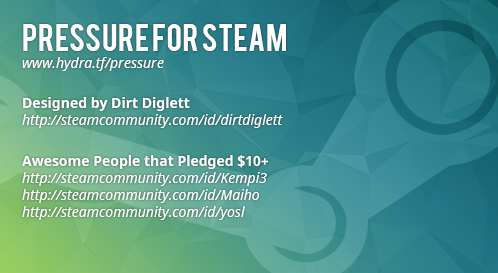
<style>
.page{position:relative;width:498px;height:273px}
.page>*{position:absolute;margin:0}
.t1{font:14px/11px "NotoSans-Italic";color:#ffffff}
.t2{font:30px/11px "Bebas";color:#ffffff}
.t3{font:14px/11px "NotoSans-Bold";color:#ffffff}
</style>
<div class="page">
<p class="t1" style="left:22px;top:24px;width:264px;height:47px"><span class="t2">Pressure for Steam<br></span>www.hydra.tf/pressure</p>
<p class="t1" style="left:22px;top:97px;width:261px;height:31px"><span class="t3">Designed by Dirt Diglett<br></span>http://steamcommunity.com/id/dirtdiglett</p>
<p class="t1" style="left:22px;top:155px;width:246px;height:65px"><span class="t3">Awesome People that Pledged $10+<br></span>http://steamcommunity.com/id/Kempi3<br>http://steamcommunity.com/id/Maiho<br>http://steamcommunity.com/id/yosl</p>
</div>
